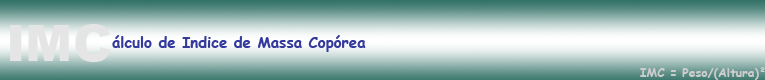
<style>
.page{position:relative;width:765px;height:80px}
.page>*{position:absolute;margin:0}
.t1{font:15px "ComicSansMS-Bold";color:#34399d}
.t2{font:12px "ComicSansMS-Bold";color:#cccccc}
</style>
<div class="page">
<p class="t1" style="left:112px;top:35px;width:254px;height:17px">álculo de Indice de Massa Copórea</p>
<p class="t2" style="left:640px;top:67px;width:125px;height:13px">IMC = Peso/(Altura)²</p>
</div>
